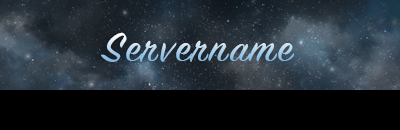
<style>
.page{position:relative;width:400px;height:130px;background:#000000}
.page>*{position:absolute;margin:0}
.t1{font:45.5px "SignPainter-HouseScript";letter-spacing:0.05em}
</style>
<div class="page">
<p class="t1" style="left:101px;top:32px;width:193px;height:30px">Servername</p>
</div>
